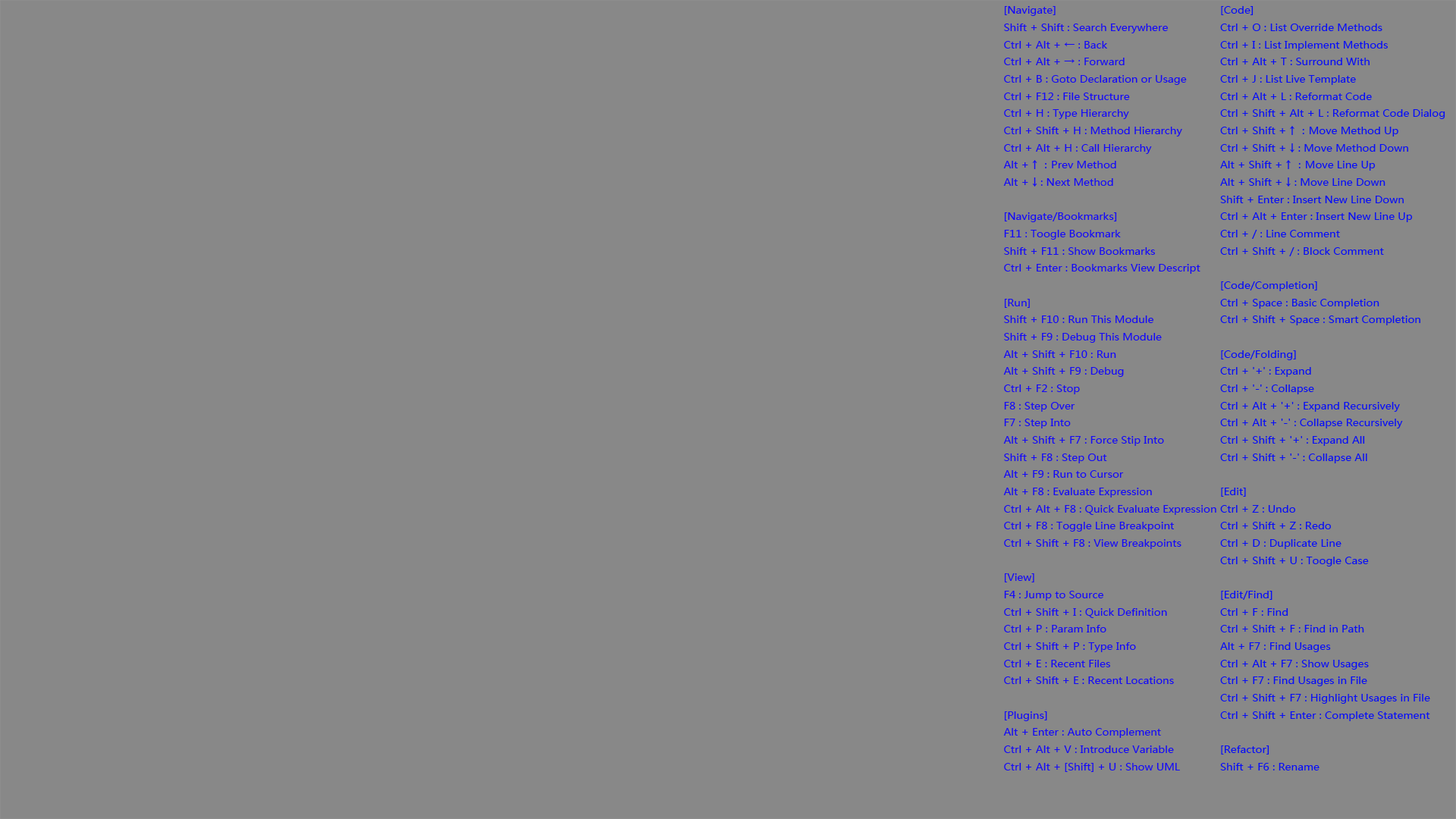
<style>
.page{position:relative;width:1456px;height:819px;background:#888888}
.page>*{position:absolute;margin:0}
.t1{font:9.8px "MicrosoftYaHei";color:#1308fa;scale:1.08 1}
.t2{font:9.8px "MicrosoftYaHei";color:#060cf9;scale:1.08 1}
</style>
<div class="page">
<p class="t1" style="left:1003px;top:6px;width:213px;height:766px">[Navigate]<br>Shift + Shift : Search Everywhere<br>Ctrl + Alt + ← : Back<br>Ctrl + Alt + → : Forward<br>Ctrl + B : Goto Declaration or Usage<br>Ctrl + F12 : File Structure<br>Ctrl + H : Type Hierarchy<br>Ctrl + Shift + H : Method Hierarchy<br>Ctrl + Alt + H : Call Hierarchy<br>Alt + ↑ ：Prev Method<br>Alt + ↓ : Next Method<br><br>[Navigate/Bookmarks]<br>F11 : Toogle Bookmark<br>Shift + F11 : Show Bookmarks<br>Ctrl + Enter : Bookmarks View Descript<br><br>[Run]<br>Shift + F10 : Run This Module<br>Shift + F9 : Debug This Module<br>Alt + Shift + F10 : Run<br>Alt + Shift + F9 : Debug<br>Ctrl + F2 : Stop<br>F8 : Step Over<br>F7 : Step Into<br>Alt + Shift + F7 : Force Stip Into<br>Shift + F8 : Step Out<br>Alt + F9 : Run to Cursor<br>Alt + F8 : Evaluate Expression<br>Ctrl + Alt + F8 : Quick Evaluate Expression<br>Ctrl + F8 : Toggle Line Breakpoint<br>Ctrl + Shift + F8 : View Breakpoints<br><br>[View]<br>F4 : Jump to Source<br>Ctrl + Shift + I : Quick Definition<br>Ctrl + P : Param Info<br>Ctrl + Shift + P : Type Info<br>Ctrl + E : Recent Files<br>Ctrl + Shift + E : Recent Locations<br><br>[Plugins]<br>Alt + Enter : Auto Complement<br>Ctrl + Alt + V : Introduce Variable<br>Ctrl + Alt + [Shift] + U : Show UML</p>
<p class="t2" style="left:1220px;top:6px;width:225px;height:764px">[Code]<br>Ctrl + O : List Override Methods<br>Ctrl + I : List Implement Methods<br>Ctrl + Alt + T : Surround With<br>Ctrl + J : List Live Template<br>Ctrl + Alt + L : Reformat Code<br>Ctrl + Shift + Alt + L : Reformat Code Dialog<br>Ctrl + Shift + ↑ ：Move Method Up<br>Ctrl + Shift + ↓ : Move Method Down<br>Alt + Shift + ↑ ：Move Line Up<br>Alt + Shift + ↓ : Move Line Down<br>Shift + Enter : Insert New Line Down<br>Ctrl + Alt + Enter : Insert New Line Up<br>Ctrl + / : Line Comment<br>Ctrl + Shift + / : Block Comment<br><br>[Code/Completion]<br>Ctrl + Space : Basic Completion<br>Ctrl + Shift + Space : Smart Completion<br><br>[Code/Folding]<br>Ctrl + '+' : Expand<br>Ctrl + '-' : Collapse<br>Ctrl + Alt + '+' : Expand Recursively<br>Ctrl + Alt + '-' : Collapse Recursively<br>Ctrl + Shift + '+' : Expand All<br>Ctrl + Shift + '-' : Collapse All<br><br>[Edit]<br>Ctrl + Z : Undo<br>Ctrl + Shift + Z : Redo<br>Ctrl + D : Duplicate Line<br>Ctrl + Shift + U : Toogle Case<br><br>[Edit/Find]<br>Ctrl + F : Find<br>Ctrl + Shift + F : Find in Path<br>Alt + F7 : Find Usages<br>Ctrl + Alt + F7 : Show Usages<br>Ctrl + F7 : Find Usages in File<br>Ctrl + Shift + F7 : Highlight Usages in File<br>Ctrl + Shift + Enter : Complete Statement<br><br>[Refactor]<br>Shift + F6 : Rename</p>
</div>
